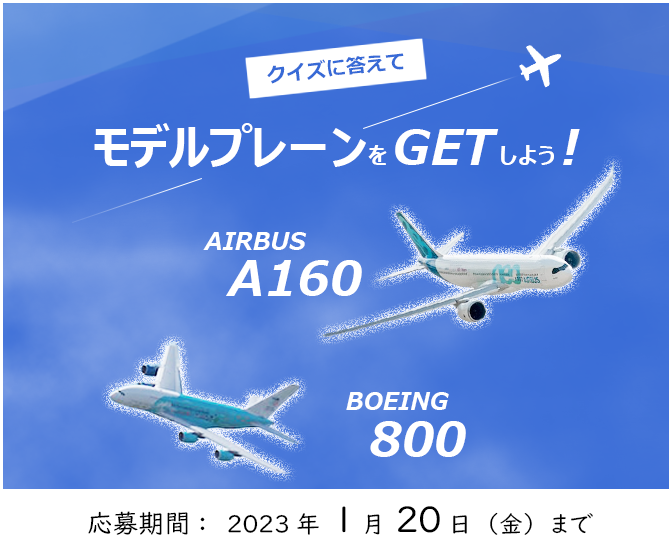
<style>
.page{position:relative;width:672px;height:560px}
.page>*{position:absolute;margin:0}
.t1{font:20px "Meiryo-BoldItalic";color:#376ad6}
.t2{font:48px "MeiryoUI-BoldItalic";color:#ffffff}
.t3{font:24px "MeiryoUI-BoldItalic";color:#ffffff}
.t4{font:24px "UDDigiKyokashoNK-R";color:#000000}
.t5{font:26px "UDDigiKyokashoNK-R";color:#000000}
.t6{font:36px "UDDigiKyokashoNK-R";color:#000000}
</style>
<div class="page">
<p class="t1" style="left:267px;top:53px;width:137px;height:31px;rotate:-6deg">クイズに答えて</p>
<p class="t2" style="left:94px;top:123px;width:486px;height:45px">モデルプレーン<span class="t3">を</span>GET<span class="t3">しよう</span>!</p>
<p class="t3" style="left:203px;top:232px;width:104px;height:18px">AIRBUS</p>
<p class="t2" style="left:226px;top:260px;width:136px;height:36px">A160</p>
<p class="t3" style="left:346px;top:392px;width:103px;height:18px">BOEING</p>
<p class="t2" style="left:370px;top:421px;width:96px;height:36px">800</p>
<p class="t4" style="left:88px;top:506px;width:505px;height:29px"><span class="t5">応募期間</span>：　2023年　<span class="t6">1</span>月<span class="t6">20</span>日（金）まで</p>
</div>
